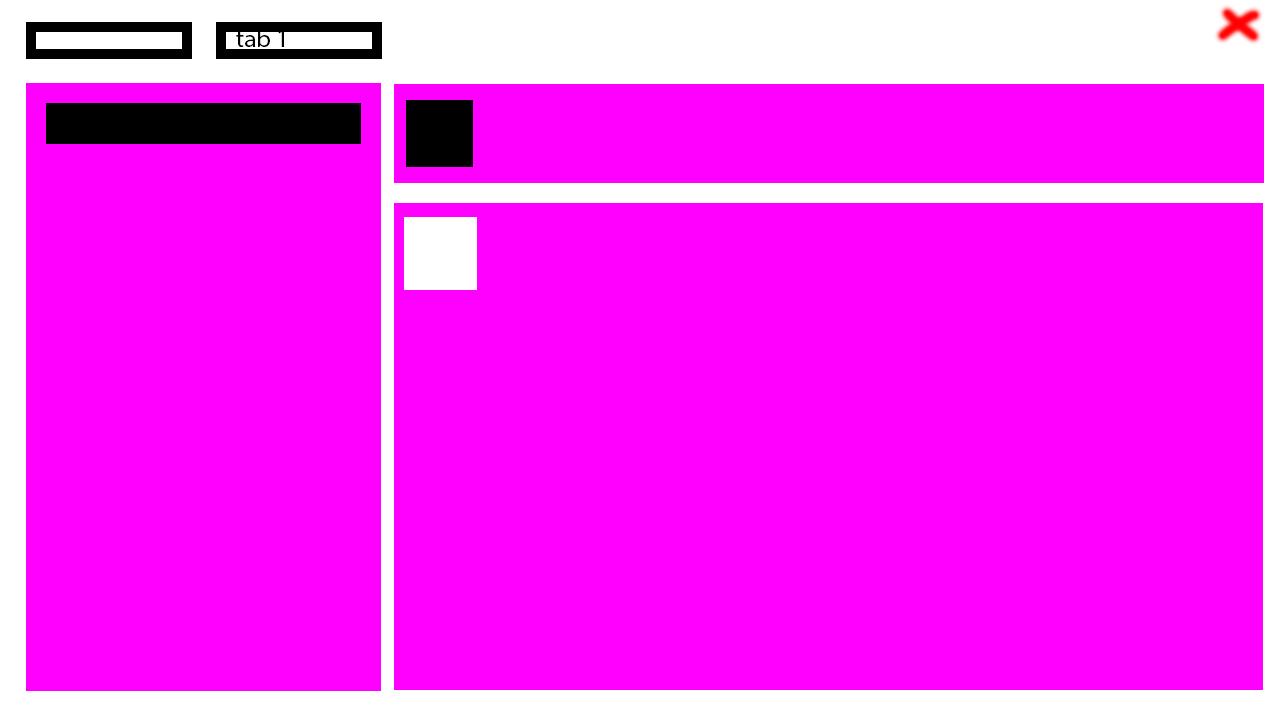
<style>
.page{position:relative;width:1280px;height:720px;background:#ff00ff}
.page>*{position:absolute;margin:0}
.t1{font:25px "MyriadPro-Regular";color:#000000}
</style>
<div class="page">
<p class="t1" style="left:236px;top:29px;width:48px;height:18px">tab 1</p>
</div>
